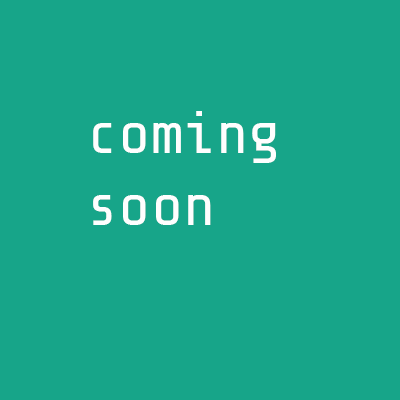
<style>
.page{position:relative;width:400px;height:400px;background:#17a589}
.page>*{position:absolute;margin:0}
.t1{font:60px "ShareTechMono-Regular";color:#fefefe}
</style>
<div class="page">
<p class="t1" style="left:93px;top:111px;width:183px;height:114px">coming<br>soon</p>
</div>
